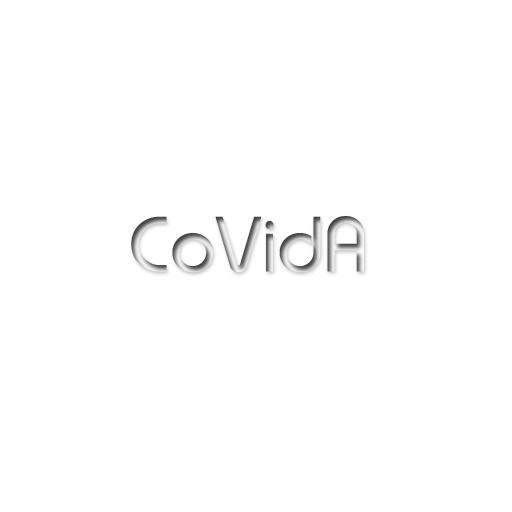
<style>
.page{position:relative;width:512px;height:512px;background:#ffffff}
.page>*{position:absolute;margin:0}
.t1{font:72.1px "Belgium"}
</style>
<div class="page">
<p class="t1" style="left:131px;top:216px;width:233px;height:57px">CoVidA</p>
</div>
